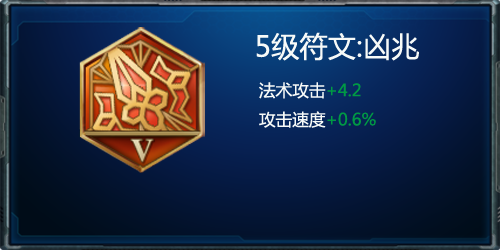
<style>
.page{position:relative;width:500px;height:250px}
.page>*{position:absolute;margin:0}
.t1{font:28.3px "MicrosoftYaHei";color:#f7faf8}
.t2{font:16.7px "MicrosoftYaHei";color:#f7faf8}
.t3{font:16.7px "MicrosoftYaHei";color:#009944}
</style>
<div class="page">
<p class="t1" style="left:256px;top:32px;width:163px;height:96px;text-align:center">5级符文:凶兆<br><span class="t2">  法术攻击</span><span class="t3">+4.2<br></span><span class="t2">  攻击速度</span><span class="t3">+0.6%</span></p>
</div>
